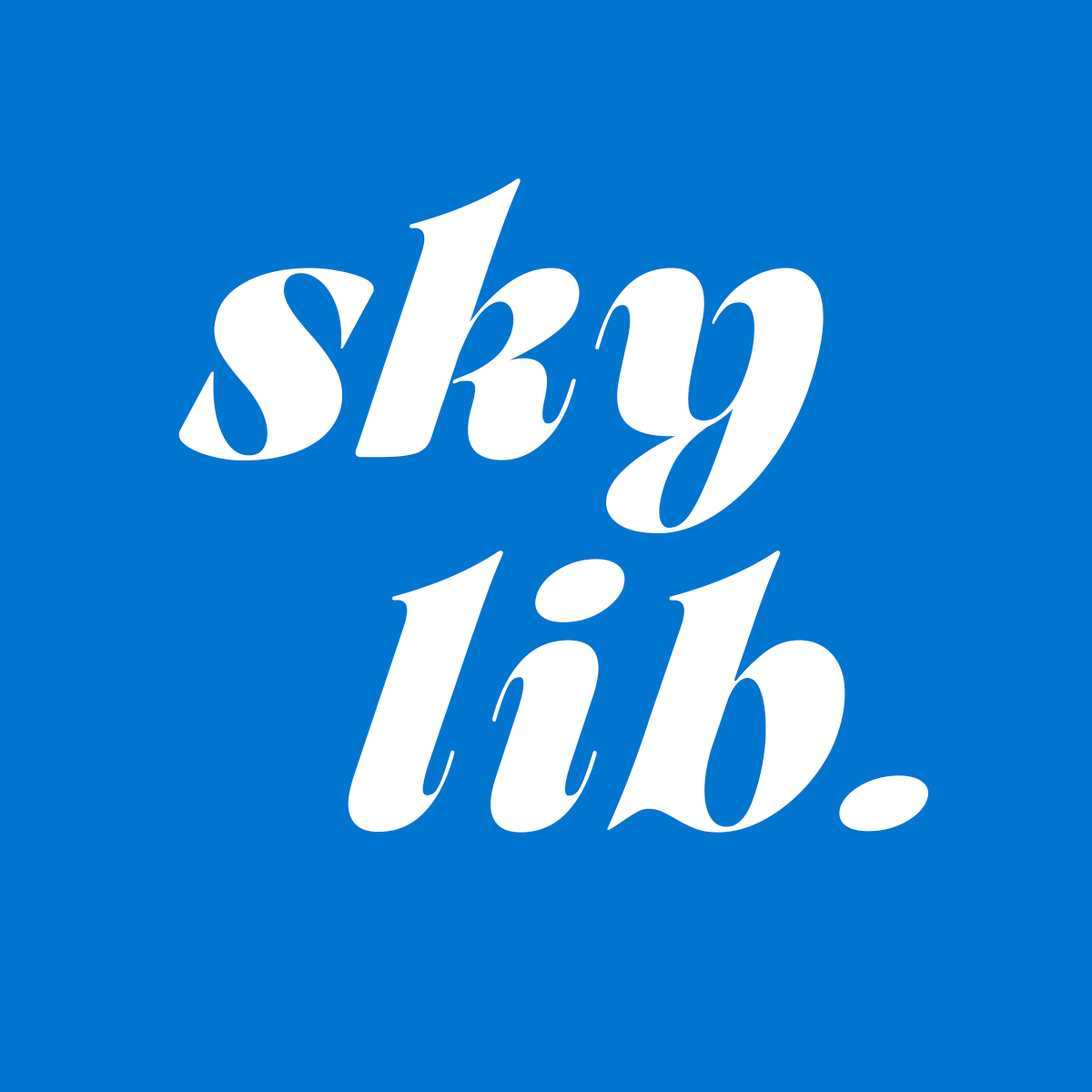
<style>
.page{position:relative;width:1092px;height:1092px;background:#0076d1}
.page>*{position:absolute;margin:0}
.t1{font:379.2px "ArsenicaTrial-BoldItalic";color:#ffffff}
.t2{font:379.2px "ArsenicaTrial-BoldItalic";letter-spacing:0.045em;color:#ffffff}
</style>
<div class="page">
<p class="t1" style="left:178px;top:178px;width:646px;height:355px">sky</p>
<p class="t2" style="left:348px;top:551px;width:580px;height:282px">lib.</p>
</div>
